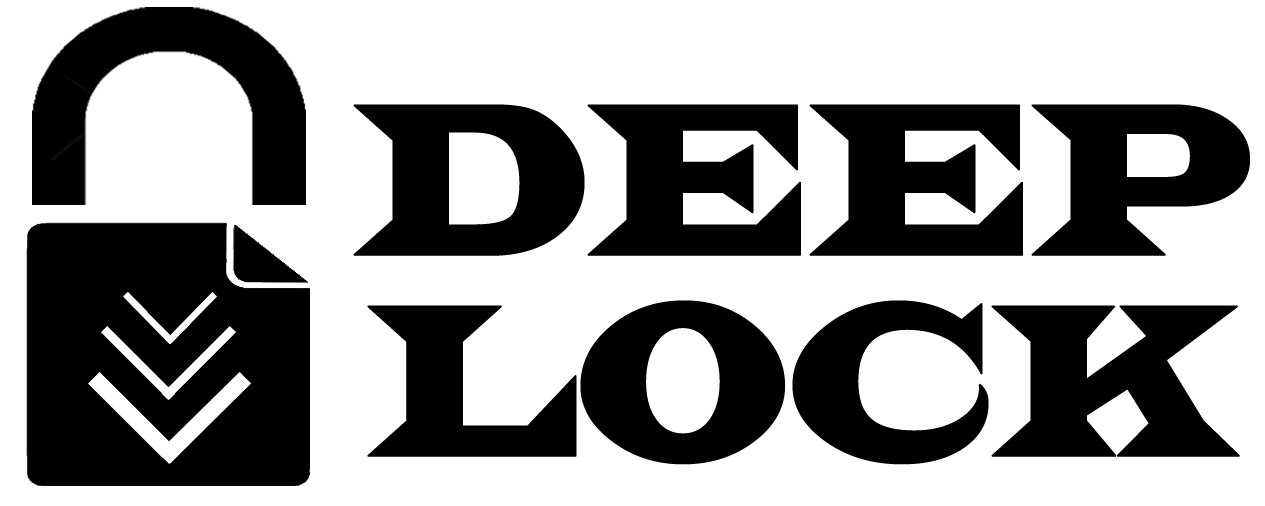
<style>
.page{position:relative;width:1265px;height:506px;background:#ffffff}
.page>*{position:absolute;margin:0}
.t1{font:224.9px/200.8px "LatinWide";letter-spacing:-0.04em;color:#000000;font-weight:bold;scale:0.71 1}
</style>
<div class="page">
<p class="t1" style="left:353px;top:104px;width:897px;height:361px;text-align:center">DEEP<br>LOCK</p>
</div>
